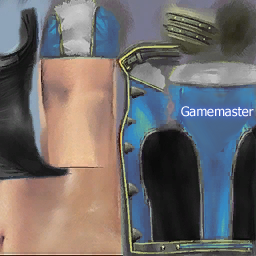
<style>
.page{position:relative;width:256px;height:256px}
.page>*{position:absolute;margin:0}
.t1{font:13px "Tahoma";color:#ffffff}
</style>
<div class="page">
<p class="t1" style="left:181px;top:106px;width:73px;height:11px">Gamemaster</p>
</div>
